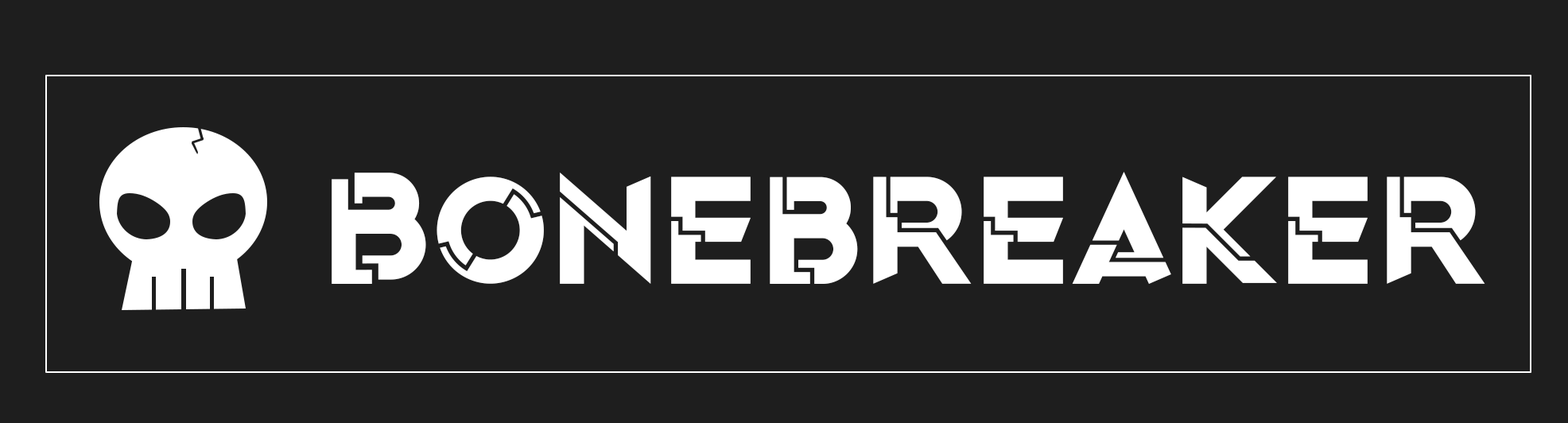
<style>
.page{position:relative;width:1568px;height:423px;background:#1e1e1e}
.page>*{position:absolute;margin:0}
.t1{font:159px "OriginTechDemoRegular";color:#ffffff}
</style>
<div class="page">
<p class="t1" style="left:332px;top:172px;width:1153px;height:112px">Bonebreaker</p>
</div>
